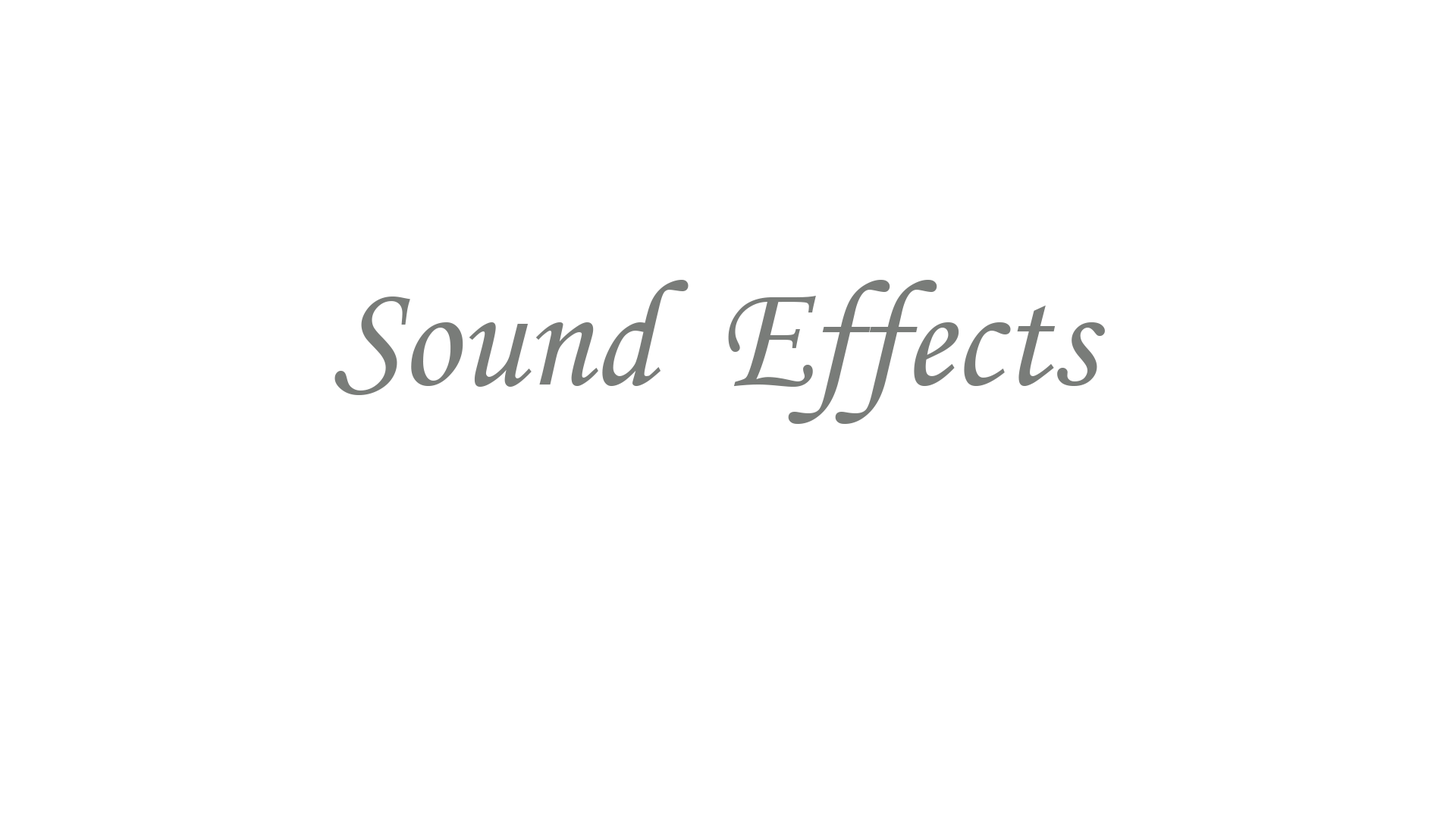
<style>
.page{position:relative;width:1456px;height:819px;background:#ffffff}
.page>*{position:absolute;margin:0}
.t1{font:151.7px "MonotypeCorsiva";color:#777a77;scale:0.96 1}
.t2{font:67.7px "MonotypeCorsiva";color:#eeb52b;scale:0.96 1}
</style>
<div class="page">
<p class="t1" style="left:334px;top:280px;width:771px;height:144px"><span class="t2"> </span>Sound  Effects<br>Effects</p>
</div>
